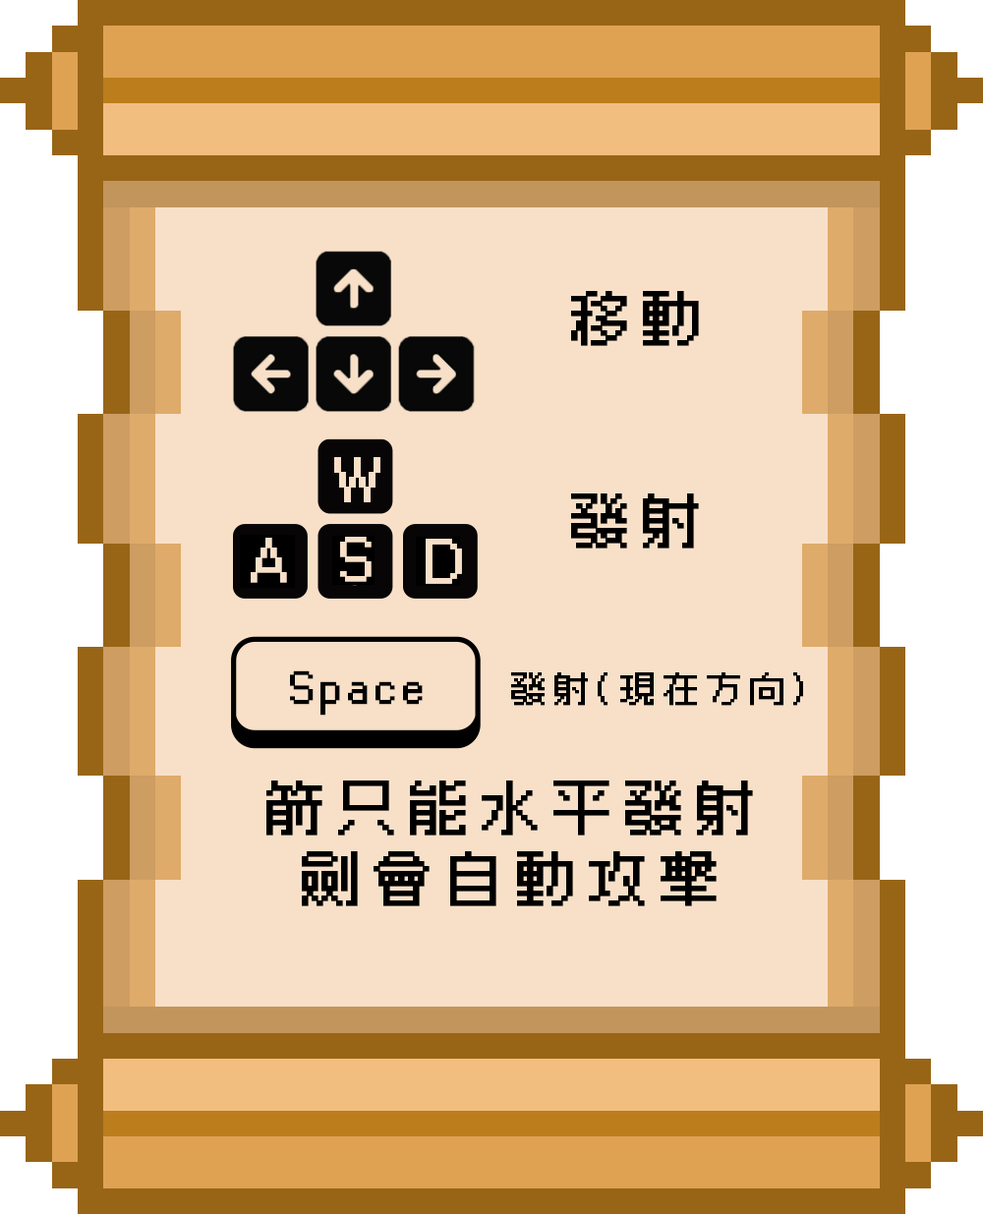
<style>
.page{position:relative;width:983px;height:1214px;background:#f8e0c8}
.page>*{position:absolute;margin:0}
.t1{font:59px "Cubic_11";letter-spacing:0.1em;color:#000000;font-weight:bold}
.t2{font:43.2px "Cubic_11";letter-spacing:0.1em;color:#000000;font-weight:bold}
.t3{font:35.4px "Cubic_11";letter-spacing:0.1em;color:#000000;font-weight:bold}
</style>
<div class="page">
<p class="t1" style="left:571px;top:291px;width:128px;height:55px">移動</p>
<p class="t1" style="left:571px;top:493px;width:128px;height:55px">發射</p>
<p class="t2" style="left:290px;top:670px;width:133px;height:45px">Space</p>
<p class="t3" style="left:511px;top:672px;width:292px;height:34px">發射(現在方向)</p>
<p class="t1" style="left:266px;top:780px;width:487px;height:126px;text-align:center">箭只能水平發射<br>劍會自動攻擊</p>
</div>
